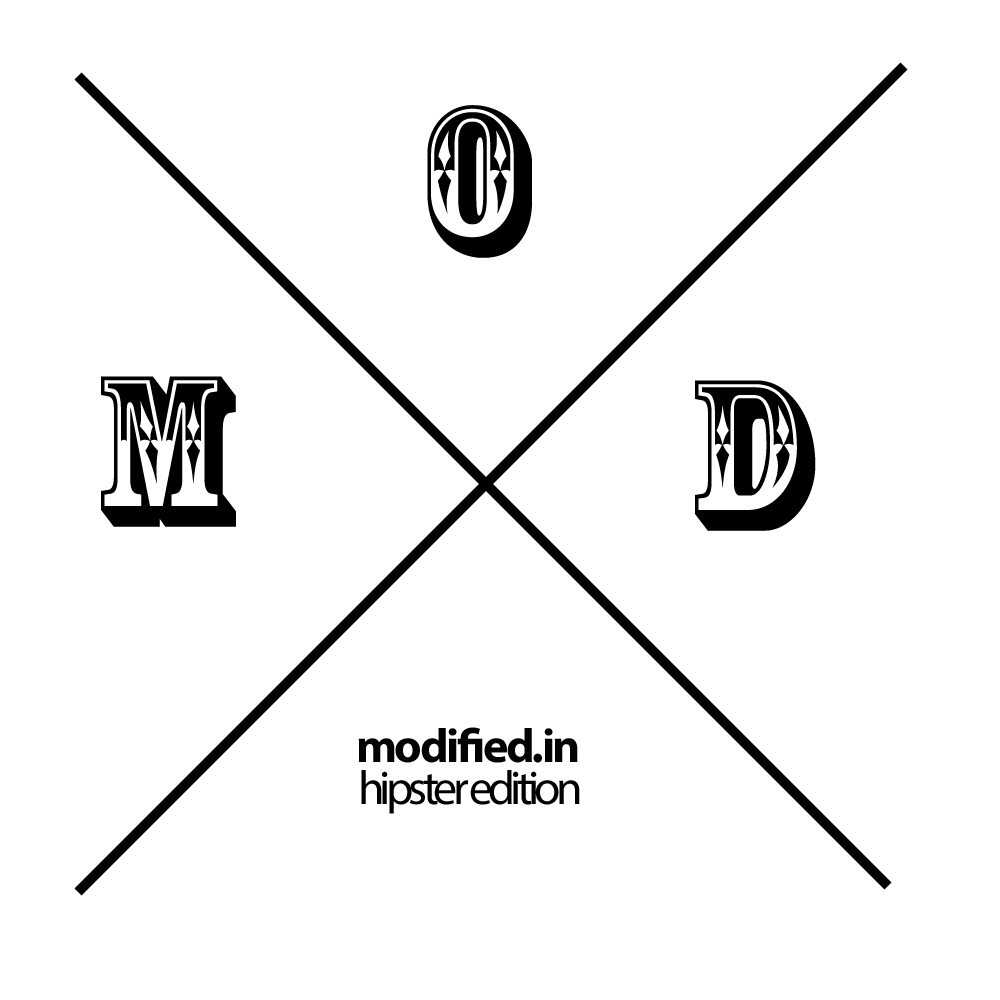
<style>
.page{position:relative;width:1000px;height:1000px;background:#ffffff}
.page>*{position:absolute;margin:0}
.t1{font:200px "RosewoodStd-Regular";color:#000000}
.t2{font:48px "MyriadPro-Bold";letter-spacing:-0.05em;color:#030303}
.t3{font:48px "MyriadPro-Regular";letter-spacing:-0.1em;color:#000000}
</style>
<div class="page">
<p class="t1" style="left:427px;top:105px;width:105px;height:153px">o</p>
<p class="t1" style="left:101px;top:376px;width:135px;height:151px">m</p>
<p class="t1" style="left:695px;top:380px;width:121px;height:151px">d</p>
<p class="t2" style="left:358px;top:727px;width:220px;height:36px">modified.in</p>
<p class="t3" style="left:361px;top:770px;width:219px;height:44px">hipster edition</p>
</div>
